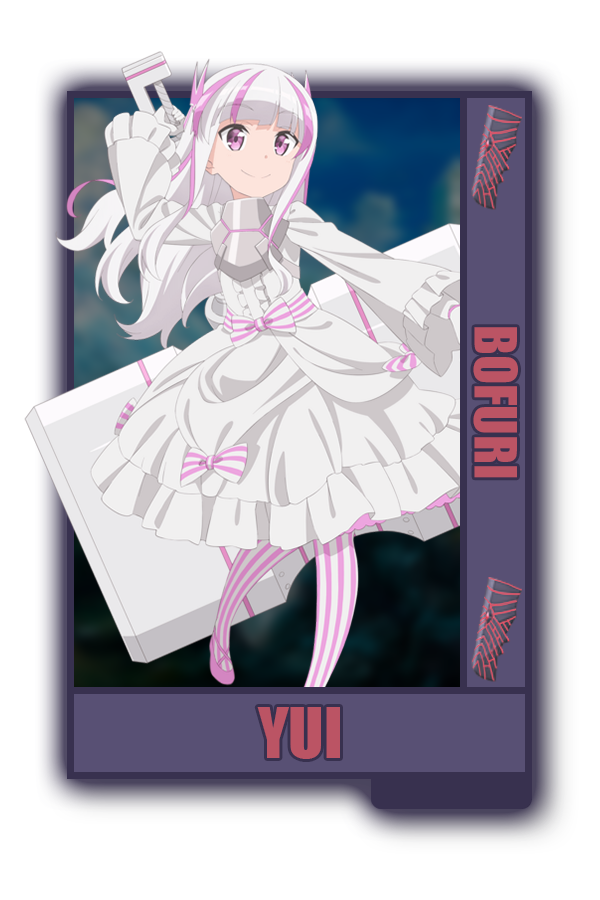
<style>
.page{position:relative;width:600px;height:900px;background:#ffffff}
.page>*{position:absolute;margin:0}
.t1{font:53.6px "Impact";color:#bb5464}
.t2{font:64.6px "Impact";color:#bb5464}
</style>
<div class="page">
<p class="t1" style="left:473px;top:327px;width:45px;height:151px;rotate:90deg">BOFURI</p>
<p class="t2" style="left:257px;top:707px;width:83px;height:52px">YUI</p>
</div>
